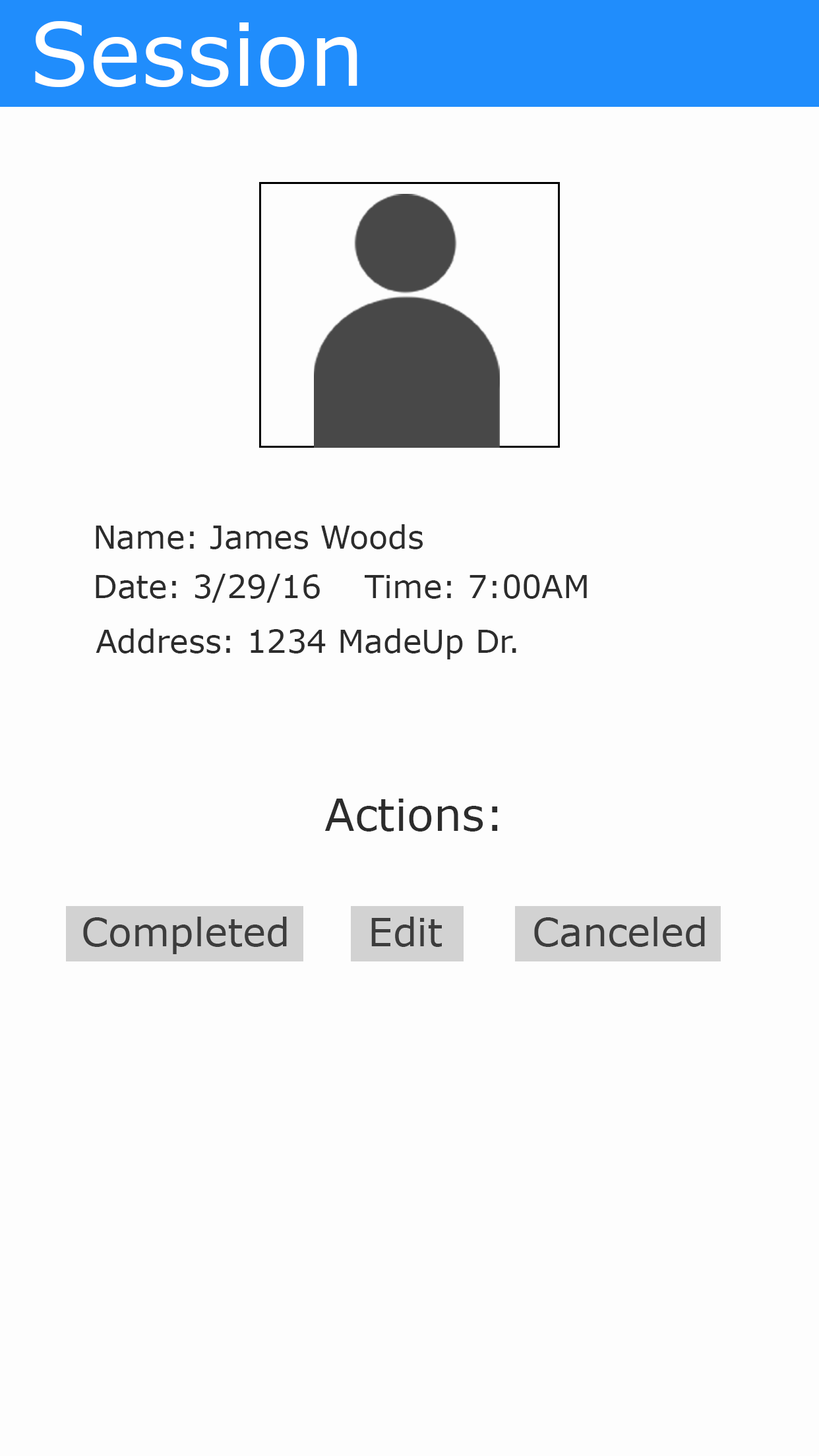
<style>
.page{position:relative;width:819px;height:1456px;background:#fdfdfd}
.page>*{position:absolute;margin:0}
.t1{font:87.2px "MSReferenceSansSerif";color:#ffffff}
.t2{font:31.5px "MSReferenceSansSerif";color:#2c2c2c}
.t3{font:44.1px "MSReferenceSansSerif";color:#2c2c2c}
.t4{font:38.7px "MSReferenceSansSerif";color:#3d3d3d}
</style>
<div class="page">
<p class="t1" style="left:35px;top:21px;width:322px;height:66px">Session</p>
<p class="t2" style="left:96px;top:524px;width:327px;height:25px">Name: James Woods</p>
<p class="t2" style="left:96px;top:574px;width:224px;height:29px">Date: 3/29/16</p>
<p class="t2" style="left:365px;top:574px;width:222px;height:25px">Time: 7:00AM</p>
<p class="t2" style="left:96px;top:628px;width:420px;height:31px">Address: 1234 MadeUp Dr.</p>
<p class="t3" style="left:325px;top:799px;width:173px;height:33px">Actions:</p>
<p class="t4" style="left:83px;top:917px;width:204px;height:37px">Completed</p>
<p class="t4" style="left:371px;top:917px;width:71px;height:30px">Edit</p>
<p class="t4" style="left:534px;top:917px;width:171px;height:30px">Canceled</p>
</div>
